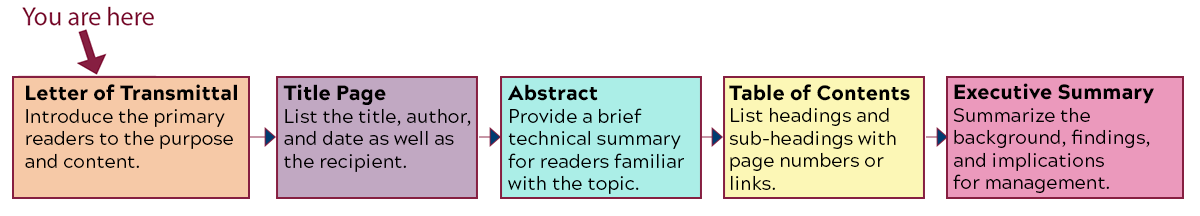
<style>
.page{position:relative;width:1200px;height:216px;background:#ffffff}
.page>*{position:absolute;margin:0}
.t1{font:18.8px "AcherusGrotesqueRegular";color:#000000}
.t2{font:20.8px "AcherusGrotesqueBlack";color:#000000}
</style>
<div class="page">
<p class="t1" style="left:25px;top:84px;width:212px;height:84px"><span class="t2">Letter of Transmittal<br></span>Introduce the primary <br>readers to the purpose <br>and content.</p>
<p class="t1" style="left:283px;top:84px;width:188px;height:88px"><span class="t2">Title Page<br></span>List the title, author,<br>and date as well as <br>the recipient.</p>
<p class="t1" style="left:508px;top:84px;width:176px;height:110px"><span class="t2">Abstract<br></span>Provide a brief <br>technical summary <br>for readers familiar <br>with the topic.</p>
<p class="t1" style="left:729px;top:84px;width:181px;height:106px"><span class="t2">Table of Contents<br></span>List headings and <br>sub-headings with <br>page numbers or <br>links.</p>
<p class="t1" style="left:953px;top:83px;width:201px;height:110px"><span class="t2">Executive Summary<br></span>Summarize the <br>background, findings, <br>and implications<br>for management.</p>
</div>
